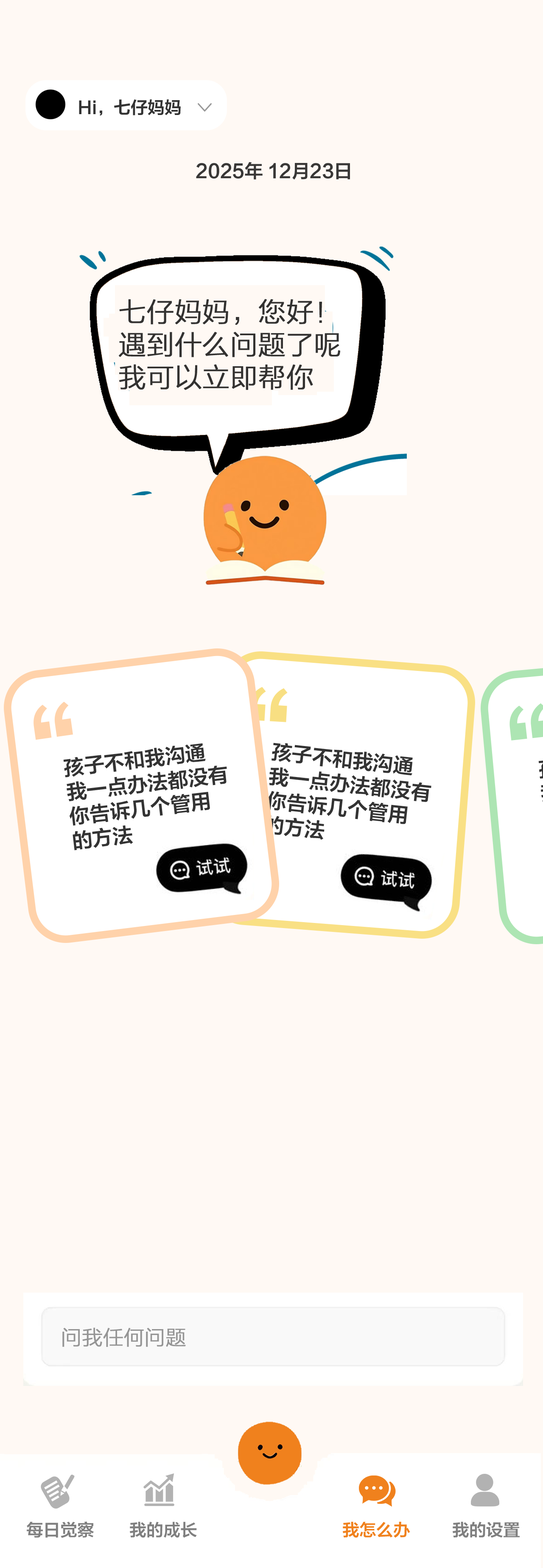
<style>
.page{position:relative;width:543px;height:1568px;background:#fff9f4}
.page>*{position:absolute;margin:0}
.t1{font:17px "FZLTZCHK--GBK1-0";color:#333333}
.t2{font:18.5px "FZLTZCHK--GBK1-0";color:#383736}
.t3{font:27.2px "FZLTKHK--GBK1-0";color:#333231;font-weight:bold}
.t4{font:99.1px "FZLTZCHK--GBK1-0";color:#f8df82}
.t5{font:99.1px "FZLTZCHK--GBK1-0";color:#ffd2aa}
.t6{font:20.4px "FZLTZCHK--GBK1-0";color:#333333}
.t7{font:20.4px "FZLTKHK--GBK1-0";color:#959595;font-weight:bold}
.t8{font:17px "FZLTZCHK--GBK1-0";color:#7f7f7f}
.t9{font:17px "FZLTZCHK--GBK1-0";color:#f0811d}
</style>
<div class="page">
<p class="t1" style="left:79px;top:99px;width:102px;height:17px">Hi，七仔妈妈</p>
<p class="t2" style="left:196px;top:162px;width:154px;height:18px">2025年 12月23日</p>
<p class="t3" style="left:119px;top:299px;width:221px;height:91px">七仔妈妈，您好！<br>遇到什么问题了呢<br>我可以立即帮你</p>
<p class="t4" style="left:249px;top:687px;width:39px;height:35px;rotate:3deg">“</p>
<p class="t5" style="left:34px;top:701px;width:39px;height:39px;rotate:-8deg">“</p>
<p class="t6" style="left:63px;top:743px;width:164px;height:107px;rotate:-7deg">孩子不和我沟通<br>我一点办法都没有<br>你告诉几个管用<br>的方法</p>
<p class="t6" style="left:264px;top:743px;width:168px;height:97px;rotate:6deg">孩子不和我沟通<br>我一点办法都没有<br>你告诉几个管用<br>的方法</p>
<p class="t7" style="left:62px;top:1327px;width:124px;height:20px">问我任何问题</p>
<p class="t8" style="left:27px;top:1521px;width:67px;height:17px">每日觉察</p>
<p class="t8" style="left:130px;top:1522px;width:67px;height:16px">我的成长</p>
<p class="t9" style="left:343px;top:1522px;width:67px;height:16px">我怎么办</p>
<p class="t8" style="left:453px;top:1522px;width:67px;height:16px">我的设置</p>
</div>
